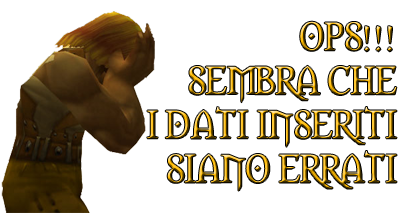
<style>
.page{position:relative;width:400px;height:213px;background:#ffffff}
.page>*{position:absolute;margin:0}
.t1{font:36.7px "Morpheus"}
</style>
<div class="page">
<p class="t1" style="left:147px;top:21px;width:250px;height:170px;text-align:right">OPS!!!<br>SEMBRA CHE<br>I DATI INSERITI<br>SIANO ERRATI</p>
</div>
